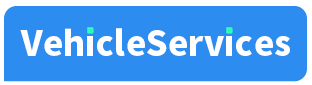
<style>
.page{position:relative;width:312px;height:85px;background:#2d8cf0}
.page>*{position:absolute;margin:0}
.t1{font:34px "SourceHanSansCN-Heavy";color:#ffffff}
</style>
<div class="page">
<p class="t1" style="left:20px;top:27px;width:270px;height:29px">VehicleServices</p>
</div>
